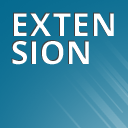
<style>
.page{position:relative;width:128px;height:128px}
.page>*{position:absolute;margin:0}
.t1{font:32.9px/27.8px "OpenSans-Bold";color:#ffffff;text-transform:uppercase}
</style>
<div class="page">
<p class="t1" style="left:11px;top:12px;width:103px;height:53px">Exten<br>sion</p>
</div>
